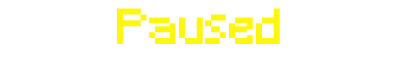
<style>
.page{position:relative;width:400px;height:60px;background:#ffffff}
.page>*{position:absolute;margin:0}
.t1{font:47.4px "Minecraft";color:#fff70b}
</style>
<div class="page">
<p class="t1" style="left:117px;top:8px;width:163px;height:36px">Paused</p>
</div>
